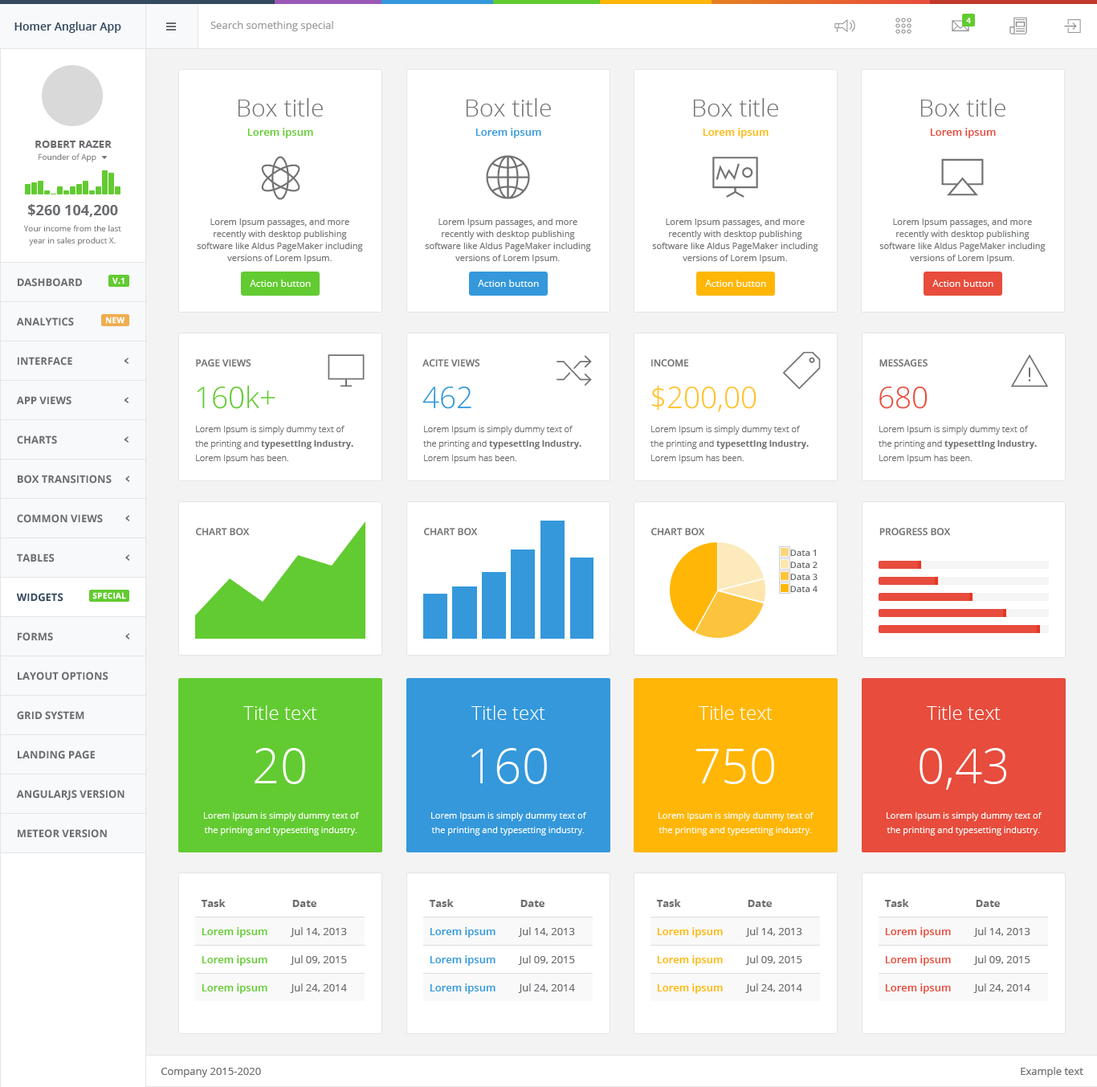
<style>
.page{position:relative;width:1097px;height:1087px;background:#ffffff}
.page>*{position:absolute;margin:0}
.t1{font:8px "OpenSans-Bold";color:#ffffff}
.t2{font:11.2px "OpenSans-Semibold";color:#34495e}
.t3{font:10.4px "OpenSans";color:#9c9999}
.t4{font:24.1px "OpenSans-Light";color:#727173}
.t5{font:10.4px "OpenSans-Semibold";color:#62cb31}
.t6{font:10.4px "OpenSans-Semibold";color:#3498db}
.t7{font:10.4px "OpenSans-Semibold";color:#ffb606}
.t8{font:10.4px "OpenSans-Semibold";color:#e74c3c}
.t9{font:10.4px "OpenSans-Bold";color:#6a6c6f}
.t10{font:8px "OpenSans";color:#6a6c6f}
.t11{font:14.5px "OpenSans-Bold";color:#6a6c6f}
.t12{font:8.8px/12.1px "OpenSans";color:#747679}
.t13{font:8px/12.1px "OpenSans";color:#6a6c6f}
.t14{font:8px "OpenSans-Bold";color:#ffffff;font-weight:bold}
.t15{font:9.6px "OpenSans";color:#ffffff}
.t16{font:9.6px "OpenSans-Semibold";color:#727173}
.t17{font:29.7px "OpenSans-Light";color:#62cb31}
.t18{font:29.7px "OpenSans-Light";color:#3498db}
.t19{font:29.7px "OpenSans-Light";color:#ffc028}
.t20{font:29.7px "OpenSans-Light";color:#e74c3c}
.t21{font:8.8px/14.5px "OpenSans-Light";color:#727173}
.t22{font:8.8px/14.5px "OpenSans-Bold";color:#727173}
.t23{font:8.8px "OpenSans-Semibold";color:#676a6c}
.t24{font:10.4px "OpenSans-Bold";color:#34495e}
.t25{font:19.3px "OpenSans-Light";color:#ffffff}
.t26{font:48.2px "OpenSans-Light";color:#ffffff}
.t27{font:8.8px/14.5px "OpenSans";color:#ffffff}
.t28{font:10.4px "OpenSans";color:#6a6c6f}
</style>
<div class="page">
<p class="t1" style="left:966px;top:18px;width:5px;height:5px">4</p>
<p class="t2" style="left:14px;top:22px;width:107px;height:11px">Homer Angluar App</p>
<p class="t3" style="left:210px;top:21px;width:123px;height:10px">Search something special</p>
<p class="t4" style="left:238px;top:98px;width:85px;height:18px">Box title</p>
<p class="t4" style="left:466px;top:98px;width:85px;height:18px">Box title</p>
<p class="t4" style="left:693px;top:98px;width:85px;height:18px">Box title</p>
<p class="t4" style="left:921px;top:98px;width:85px;height:18px">Box title</p>
<p class="t5" style="left:247px;top:128px;width:66px;height:10px">Lorem ipsum</p>
<p class="t6" style="left:476px;top:128px;width:65px;height:10px">Lorem ipsum</p>
<p class="t7" style="left:703px;top:128px;width:66px;height:10px">Lorem ipsum</p>
<p class="t8" style="left:930px;top:128px;width:66px;height:10px">Lorem ipsum</p>
<p class="t9" style="left:35px;top:141px;width:77px;height:7px">ROBERT RAZER</p>
<p class="t10" style="left:39px;top:153px;width:57px;height:9px">Founder of App</p>
<p class="t11" style="left:28px;top:204px;width:90px;height:13px">$260 104,200</p>
<p class="t12" style="left:197px;top:218px;width:166px;height:45px;text-align:center">Lorem Ipsum passages, and more recently with desktop publishing software like Aldus PageMaker including versions of Lorem Ipsum.</p>
<p class="t12" style="left:425px;top:218px;width:166px;height:45px;text-align:center">Lorem Ipsum passages, and more recently with desktop publishing software like Aldus PageMaker including versions of Lorem Ipsum.</p>
<p class="t12" style="left:652px;top:218px;width:166px;height:45px;text-align:center">Lorem Ipsum passages, and more recently with desktop publishing software like Aldus PageMaker including versions of Lorem Ipsum.</p>
<p class="t12" style="left:880px;top:218px;width:166px;height:45px;text-align:center">Lorem Ipsum passages, and more recently with desktop publishing software like Aldus PageMaker including versions of Lorem Ipsum.</p>
<p class="t13" style="left:23px;top:225px;width:98px;height:21px;text-align:center">Your income from the last<br>year in sales product X.</p>
<p class="t9" style="left:18px;top:278px;width:64px;height:9px">DASHBOARD</p>
<p class="t14" style="left:112px;top:277px;width:13px;height:7px">V.1</p>
<p class="t15" style="left:250px;top:280px;width:61px;height:7px">Action button</p>
<p class="t15" style="left:478px;top:280px;width:61px;height:7px">Action button</p>
<p class="t15" style="left:705px;top:280px;width:61px;height:7px">Action button</p>
<p class="t15" style="left:933px;top:280px;width:61px;height:7px">Action button</p>
<p class="t9" style="left:16px;top:317px;width:58px;height:9px">ANALYTICS</p>
<p class="t14" style="left:106px;top:316px;width:19px;height:8px">NEW</p>
<p class="t9" style="left:18px;top:357px;width:54px;height:8px">INTERFACE</p>
<p class="t16" style="left:196px;top:359px;width:55px;height:8px">PAGE VIEWS</p>
<p class="t16" style="left:423px;top:359px;width:57px;height:8px">ACITE VIEWS</p>
<p class="t16" style="left:651px;top:359px;width:38px;height:8px">INCOME</p>
<p class="t16" style="left:880px;top:359px;width:48px;height:8px">MESSAGES</p>
<p class="t17" style="left:197px;top:385px;width:79px;height:24px">160k+</p>
<p class="t18" style="left:423px;top:386px;width:48px;height:23px">462</p>
<p class="t19" style="left:651px;top:385px;width:106px;height:27px">$200,00</p>
<p class="t20" style="left:880px;top:386px;width:48px;height:23px">680</p>
<p class="t9" style="left:16px;top:396px;width:55px;height:9px">APP VIEWS</p>
<p class="t21" style="left:195px;top:426px;width:158px;height:37px">Lorem Ipsum is simply dummy text of the printing and <span class="t22">typesetting industry.</span> Lorem Ipsum has been.</p>
<p class="t21" style="left:423px;top:426px;width:159px;height:37px">Lorem Ipsum is simply dummy text of the printing and <span class="t22">typesetting industry.</span> Lorem Ipsum has been.</p>
<p class="t21" style="left:651px;top:426px;width:158px;height:37px">Lorem Ipsum is simply dummy text of the printing and <span class="t22">typesetting industry.</span> Lorem Ipsum has been.</p>
<p class="t21" style="left:879px;top:426px;width:158px;height:37px">Lorem Ipsum is simply dummy text of the printing and <span class="t22">typesetting industry.</span> Lorem Ipsum has been.</p>
<p class="t9" style="left:17px;top:435px;width:40px;height:9px">CHARTS</p>
<p class="t9" style="left:18px;top:475px;width:94px;height:9px">BOX TRANSITIONS</p>
<p class="t9" style="left:17px;top:514px;width:86px;height:9px">COMMON VIEWS</p>
<p class="t16" style="left:196px;top:528px;width:54px;height:8px">CHART BOX</p>
<p class="t16" style="left:424px;top:528px;width:54px;height:8px">CHART BOX</p>
<p class="t16" style="left:651px;top:528px;width:54px;height:8px">CHART BOX</p>
<p class="t16" style="left:880px;top:528px;width:71px;height:8px">PROGRESS BOX</p>
<p class="t9" style="left:17px;top:553px;width:38px;height:9px">TABLES</p>
<p class="t23" style="left:790px;top:549px;width:26px;height:7px">Data 1</p>
<p class="t23" style="left:790px;top:561px;width:28px;height:7px">Data 2</p>
<p class="t23" style="left:790px;top:574px;width:28px;height:6px">Data 3</p>
<p class="t24" style="left:16px;top:593px;width:47px;height:9px">WIDGETS</p>
<p class="t14" style="left:92px;top:592px;width:34px;height:7px">SPECIAL</p>
<p class="t23" style="left:790px;top:586px;width:28px;height:6px">Data 4</p>
<p class="t9" style="left:18px;top:632px;width:35px;height:9px">FORMS</p>
<p class="t9" style="left:18px;top:672px;width:90px;height:8px">LAYOUT OPTIONS</p>
<p class="t9" style="left:17px;top:711px;width:67px;height:9px">GRID SYSTEM</p>
<p class="t25" style="left:243px;top:705px;width:74px;height:15px">Title text</p>
<p class="t25" style="left:471px;top:705px;width:74px;height:15px">Title text</p>
<p class="t25" style="left:699px;top:705px;width:74px;height:15px">Title text</p>
<p class="t25" style="left:927px;top:705px;width:74px;height:15px">Title text</p>
<p class="t26" style="left:255px;top:748px;width:50px;height:36px">20</p>
<p class="t26" style="left:471px;top:748px;width:76px;height:36px">160</p>
<p class="t26" style="left:696px;top:748px;width:78px;height:36px">750</p>
<p class="t26" style="left:920px;top:748px;width:86px;height:42px">0,43</p>
<p class="t9" style="left:18px;top:750px;width:77px;height:9px">LANDING PAGE</p>
<p class="t9" style="left:16px;top:790px;width:109px;height:10px">ANGULARJS VERSION</p>
<p class="t27" style="left:204px;top:812px;width:156px;height:23px;text-align:center">Lorem Ipsum is simply dummy text of the printing and typesetting industry.</p>
<p class="t27" style="left:431px;top:812px;width:156px;height:23px;text-align:center">Lorem Ipsum is simply dummy text of the printing and typesetting industry.</p>
<p class="t27" style="left:659px;top:812px;width:155px;height:23px;text-align:center">Lorem Ipsum is simply dummy text of the printing and typesetting industry.</p>
<p class="t27" style="left:887px;top:812px;width:156px;height:23px;text-align:center">Lorem Ipsum is simply dummy text of the printing and typesetting industry.</p>
<p class="t9" style="left:18px;top:829px;width:89px;height:9px">METEOR VERSION</p>
<p class="t9" style="left:201px;top:899px;width:25px;height:8px">Task</p>
<p class="t9" style="left:292px;top:900px;width:24px;height:7px">Date</p>
<p class="t9" style="left:429px;top:899px;width:25px;height:8px">Task</p>
<p class="t9" style="left:520px;top:900px;width:25px;height:7px">Date</p>
<p class="t9" style="left:656px;top:899px;width:25px;height:8px">Task</p>
<p class="t9" style="left:748px;top:900px;width:24px;height:7px">Date</p>
<p class="t9" style="left:884px;top:899px;width:25px;height:8px">Task</p>
<p class="t9" style="left:976px;top:900px;width:24px;height:7px">Date</p>
<p class="t5" style="left:202px;top:927px;width:65px;height:10px">Lorem ipsum</p>
<p class="t28" style="left:290px;top:927px;width:57px;height:10px">Jul 14, 2013</p>
<p class="t6" style="left:430px;top:927px;width:66px;height:10px">Lorem ipsum</p>
<p class="t28" style="left:518px;top:927px;width:57px;height:10px">Jul 14, 2013</p>
<p class="t7" style="left:657px;top:927px;width:66px;height:10px">Lorem ipsum</p>
<p class="t28" style="left:745px;top:927px;width:57px;height:10px">Jul 14, 2013</p>
<p class="t8" style="left:885px;top:927px;width:66px;height:10px">Lorem ipsum</p>
<p class="t28" style="left:974px;top:927px;width:57px;height:10px">Jul 14, 2013</p>
<p class="t5" style="left:202px;top:955px;width:65px;height:10px">Lorem ipsum</p>
<p class="t28" style="left:290px;top:955px;width:57px;height:10px">Jul 09, 2015</p>
<p class="t6" style="left:430px;top:955px;width:66px;height:10px">Lorem ipsum</p>
<p class="t28" style="left:518px;top:955px;width:57px;height:10px">Jul 09, 2015</p>
<p class="t7" style="left:657px;top:955px;width:66px;height:10px">Lorem ipsum</p>
<p class="t28" style="left:745px;top:955px;width:57px;height:10px">Jul 09, 2015</p>
<p class="t8" style="left:885px;top:955px;width:66px;height:10px">Lorem ipsum</p>
<p class="t28" style="left:974px;top:955px;width:57px;height:10px">Jul 09, 2015</p>
<p class="t5" style="left:202px;top:983px;width:65px;height:11px">Lorem ipsum</p>
<p class="t28" style="left:290px;top:983px;width:57px;height:10px">Jul 24, 2014</p>
<p class="t6" style="left:430px;top:983px;width:66px;height:11px">Lorem ipsum</p>
<p class="t28" style="left:518px;top:983px;width:57px;height:10px">Jul 24, 2014</p>
<p class="t7" style="left:657px;top:983px;width:66px;height:11px">Lorem ipsum</p>
<p class="t28" style="left:745px;top:983px;width:57px;height:10px">Jul 24, 2014</p>
<p class="t8" style="left:885px;top:983px;width:66px;height:11px">Lorem ipsum</p>
<p class="t28" style="left:974px;top:983px;width:57px;height:10px">Jul 24, 2014</p>
<p class="t28" style="left:161px;top:1067px;width:100px;height:10px">Company 2015-2020</p>
<p class="t28" style="left:1021px;top:1067px;width:63px;height:10px">Example text</p>
</div>
